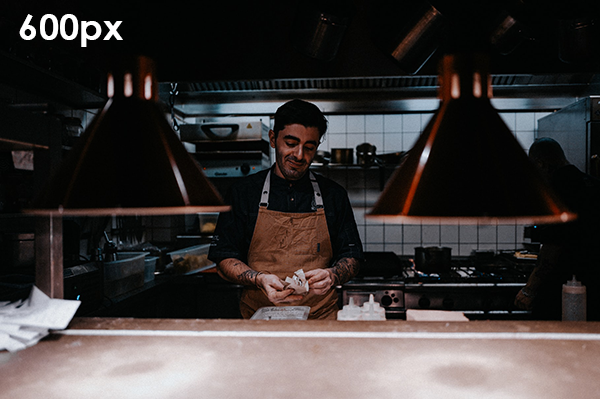
<style>
.page{position:relative;width:600px;height:399px}
.page>*{position:absolute;margin:0}
.t1{font:36px "CenturyGothic-Bold";color:#ffffff}
</style>
<div class="page">
<p class="t1" style="left:19px;top:14px;width:104px;height:33px">600px</p>
</div>
